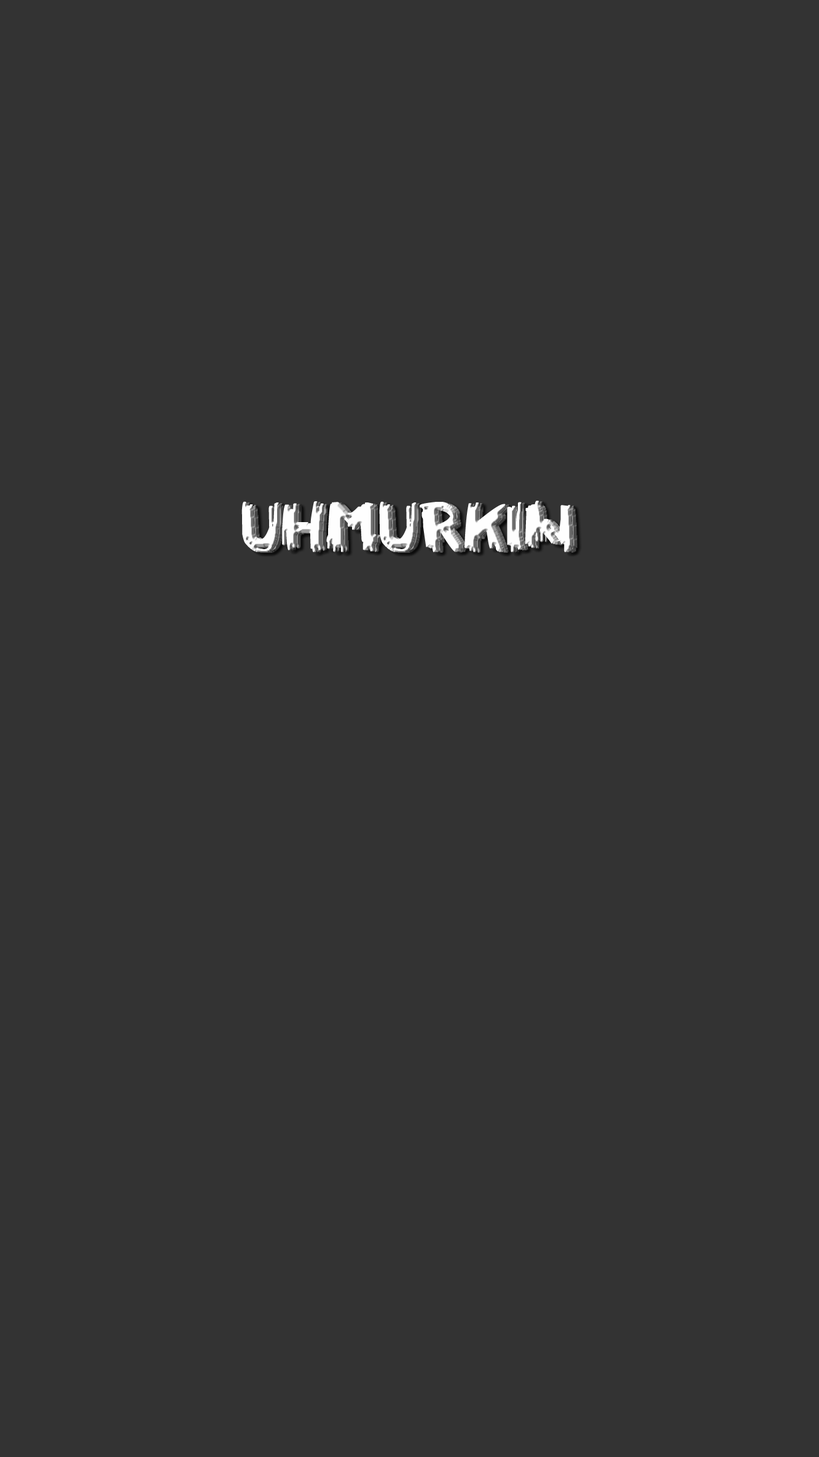
<style>
.page{position:relative;width:819px;height:1457px;background:#333333}
.page>*{position:absolute;margin:0}
.t1{font:67.6px "Milkman-Conspiracy";color:#fefefe}
</style>
<div class="page">
<p class="t1" style="left:241px;top:500px;width:332px;height:52px">UHMURKIN</p>
</div>
